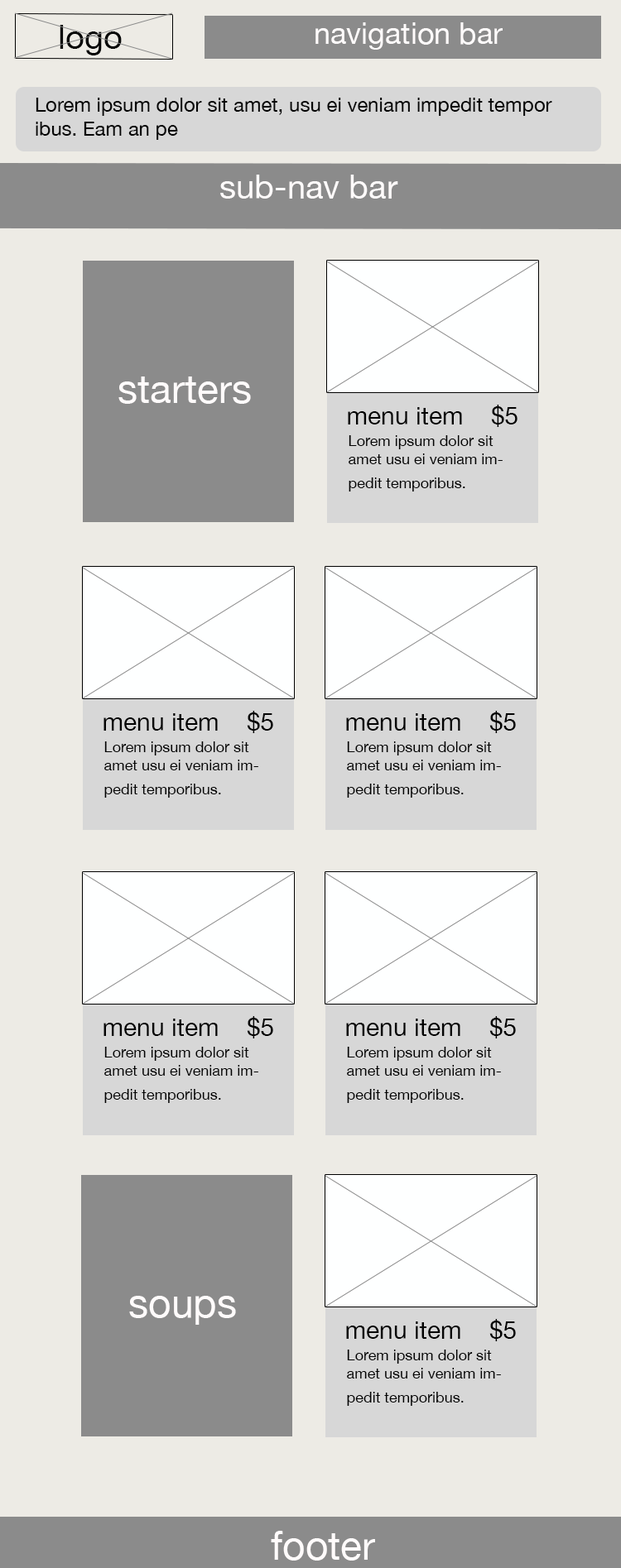
<style>
.page{position:relative;width:621px;height:1568px;background:#edebe5}
.page>*{position:absolute;margin:0}
.t1{font:33.1px "HelveticaNeue";color:#030303}
.t2{font:29.8px "HelveticaNeue";color:#fffbfb}
.t3{font:19.9px "HelveticaNeue";color:#050505}
.t4{font:33.1px "HelveticaNeue";color:#fffbfb}
.t5{font:39.7px "HelveticaNeue";color:#fffbfb}
.t6{font:24.8px "HelveticaNeue";color:#020202}
.t7{font:14.9px "HelveticaNeue";color:#020202}
</style>
<div class="page">
<p class="t1" style="left:60px;top:25px;width:62px;height:30px">logo</p>
<p class="t2" style="left:315px;top:22px;width:187px;height:28px">navigation bar</p>
<p class="t3" style="left:36px;top:98px;width:516px;height:42px">Lorem ipsum dolor sit amet, usu ei veniam impedit tempor<br>ibus. Eam an pe</p>
<p class="t4" style="left:220px;top:175px;width:178px;height:24px">sub-nav bar</p>
<p class="t5" style="left:118px;top:376px;width:133px;height:28px">starters</p>
<p class="t6" style="left:348px;top:405px;width:169px;height:22px">menu item    $5</p>
<p class="t7" style="left:348px;top:435px;width:154px;height:56px">Lorem ipsum dolor sit amet usu ei veniam impedit temporibus.</p>
<p class="t6" style="left:103px;top:711px;width:170px;height:22px">menu item    $5</p>
<p class="t6" style="left:346px;top:711px;width:169px;height:22px">menu item    $5</p>
<p class="t7" style="left:104px;top:741px;width:154px;height:57px">Lorem ipsum dolor sit amet usu ei veniam impedit temporibus.</p>
<p class="t7" style="left:347px;top:741px;width:154px;height:57px">Lorem ipsum dolor sit amet usu ei veniam impedit temporibus.</p>
<p class="t6" style="left:103px;top:1016px;width:170px;height:22px">menu item    $5</p>
<p class="t6" style="left:346px;top:1016px;width:169px;height:22px">menu item    $5</p>
<p class="t7" style="left:104px;top:1047px;width:154px;height:56px">Lorem ipsum dolor sit amet usu ei veniam impedit temporibus.</p>
<p class="t7" style="left:347px;top:1047px;width:154px;height:56px">Lorem ipsum dolor sit amet usu ei veniam impedit temporibus.</p>
<p class="t5" style="left:129px;top:1296px;width:107px;height:29px">soups</p>
<p class="t6" style="left:346px;top:1319px;width:169px;height:22px">menu item    $5</p>
<p class="t7" style="left:347px;top:1350px;width:154px;height:56px">Lorem ipsum dolor sit amet usu ei veniam impedit temporibus.</p>
<p class="t5" style="left:271px;top:1531px;width:104px;height:30px">footer</p>
</div>
